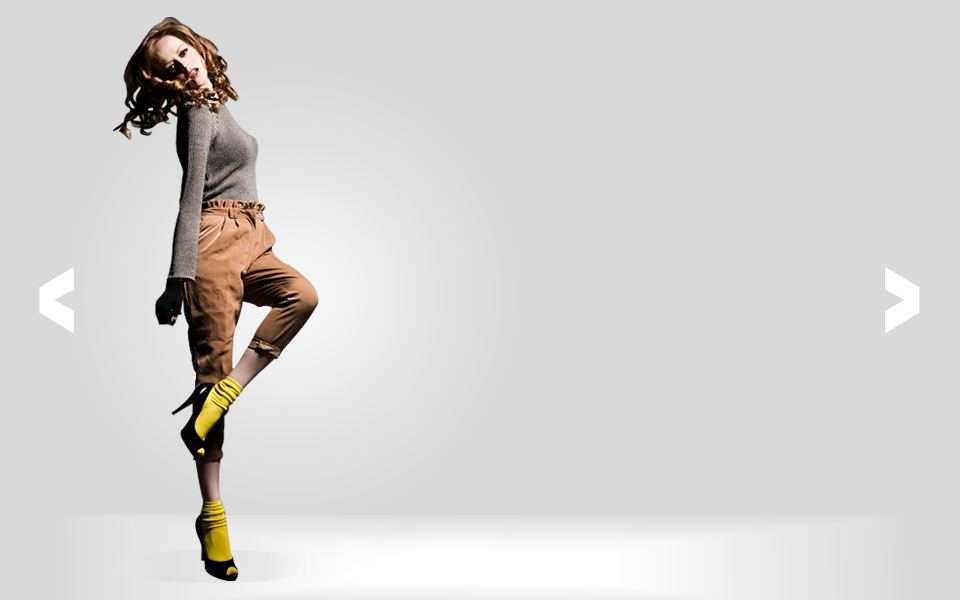
<style>
.page{position:relative;width:960px;height:600px;background:#d9d9d9}
.page>*{position:absolute;margin:0}
.t1{font:120px "Anton";color:#ffffff;font-weight:bold}
</style>
<div class="page">
<p class="t1" style="left:39px;top:267px;width:35px;height:66px;rotate:180deg">&gt;</p>
<p class="t1" style="left:885px;top:267px;width:35px;height:66px">&gt;</p>
</div>
